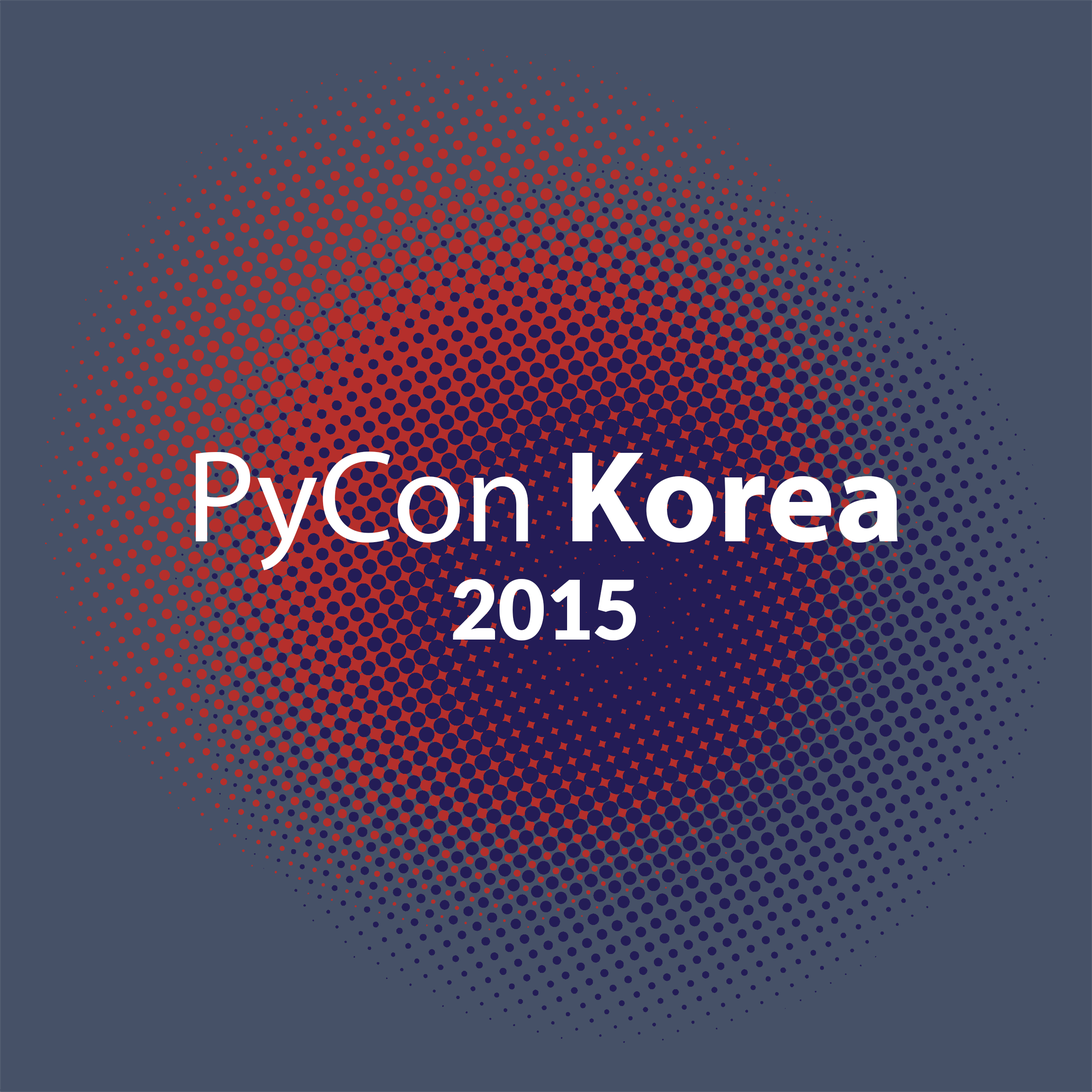
<style>
.page{position:relative;width:1092px;height:1092px;background:#465167}
.page>*{position:absolute;margin:0}
.t1{font:131px/98.3px "MyriadPro-Regular";color:#ffffff}
.t2{font:131px/98.3px "MyriadPro-Bold";color:#ffffff}
.t3{font:81.9px/98.3px "Lato-Black";color:#ffffff}
</style>
<div class="page">
<p class="t1" style="left:196px;top:452px;width:702px;height:189px;text-align:center">PyCon<span class="t2"> Korea<br></span><span class="t3">2015</span></p>
</div>
